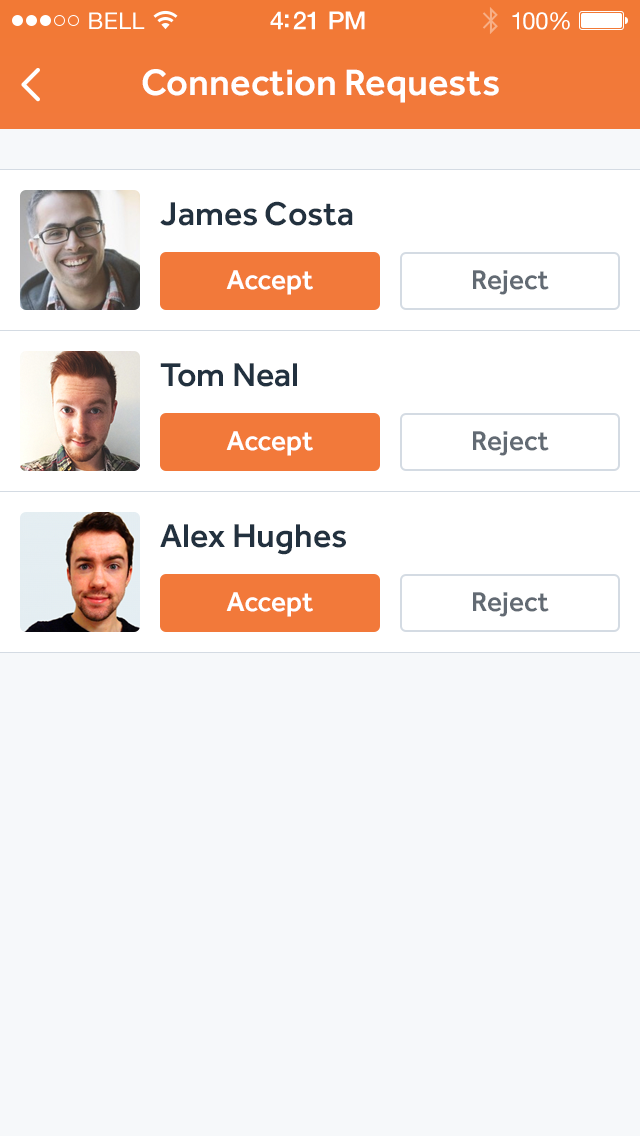
<style>
.page{position:relative;width:640px;height:1136px;background:#f6f8fa}
.page>*{position:absolute;margin:0}
.t1{font:23px "HelveticaNeue";letter-spacing:0.02em;color:#ffffff}
.t2{font:25px "HelveticaNeue-Medium";letter-spacing:-0.02em;color:#ffffff}
.t3{font:24px "HelveticaNeue";letter-spacing:-0.02em;color:#ffffff}
.t4{font:38px "Effra-Medium";color:#ffffff}
.t5{font:34px "Effra-Medium";color:#22313f}
.t6{font:28px "Effra-Medium";color:#ffffff}
.t7{font:28px "Effra-Medium";color:#626a73}
</style>
<div class="page">
<p class="t1" style="left:89px;top:12px;width:56px;height:17px">BELL</p>
<p class="t2" style="left:270px;top:11px;width:95px;height:19px">4:21 PM</p>
<p class="t3" style="left:512px;top:12px;width:58px;height:18px">100%</p>
<p class="t4" style="left:142px;top:69px;width:357px;height:34px">Connection Requests</p>
<p class="t5" style="left:160px;top:201px;width:193px;height:25px">James Costa</p>
<p class="t6" style="left:226px;top:270px;width:87px;height:25px">Accept</p>
<p class="t7" style="left:473px;top:270px;width:76px;height:25px">Reject</p>
<p class="t5" style="left:160px;top:363px;width:137px;height:24px">Tom Neal</p>
<p class="t6" style="left:226px;top:431px;width:87px;height:25px">Accept</p>
<p class="t7" style="left:473px;top:431px;width:76px;height:25px">Reject</p>
<p class="t5" style="left:160px;top:524px;width:186px;height:31px">Alex Hughes</p>
<p class="t6" style="left:226px;top:592px;width:87px;height:25px">Accept</p>
<p class="t7" style="left:473px;top:592px;width:76px;height:25px">Reject</p>
</div>
